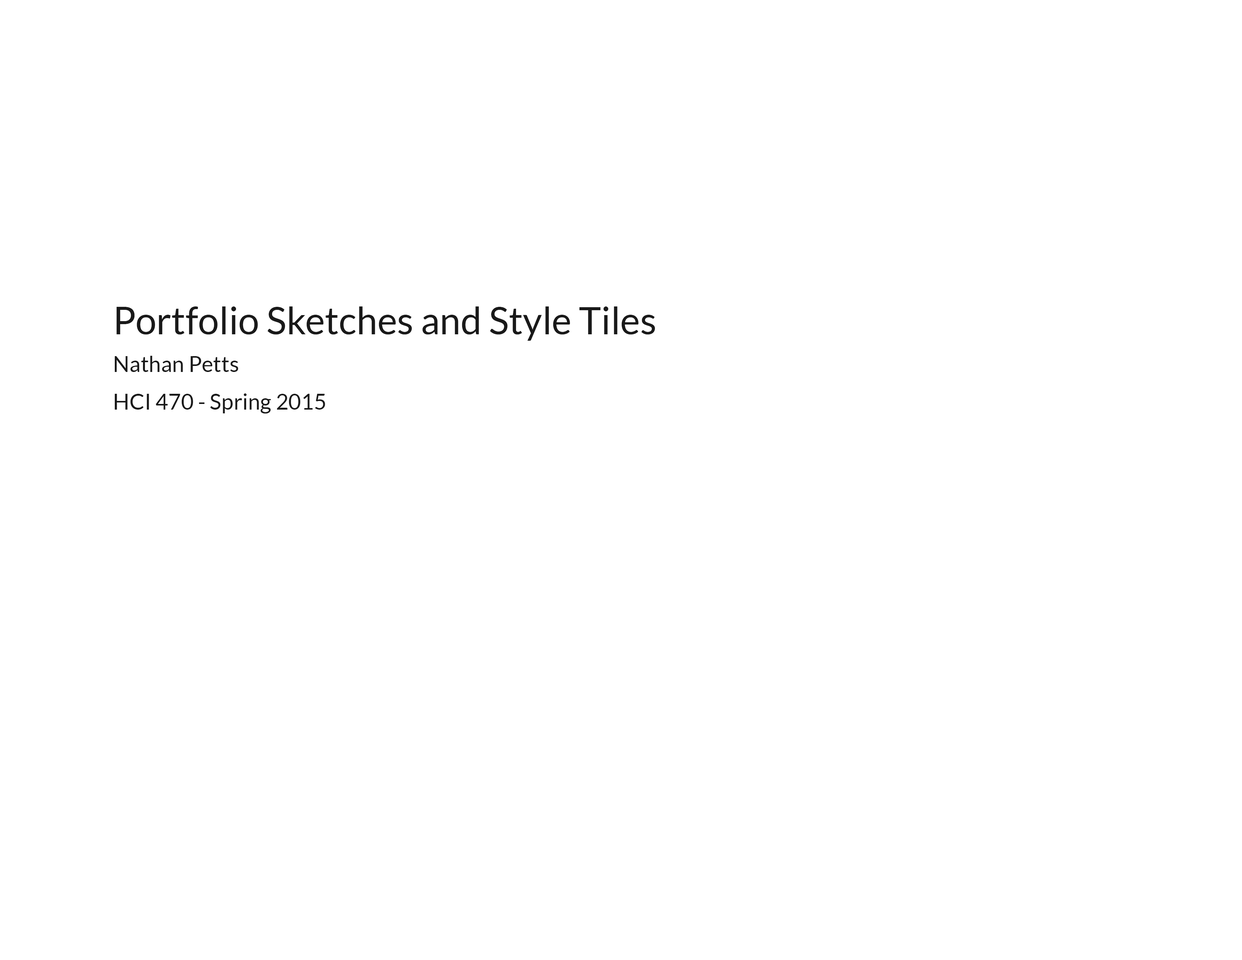
<style>
.page{position:relative;width:1242px;height:960px;background:#ffffff}
.page>*{position:absolute;margin:0}
.t1{font:37.6px/37.6px "Lato-Regular";color:#191919}
.t2{font:22px/37.6px "Lato-Regular";color:#191919}
</style>
<div class="page">
<p class="t1" style="left:115px;top:306px;width:540px;height:108px">Portfolio Sketches and Style Tiles<br><span class="t2">Nathan Petts<br>HCI 470 - Spring 2015</span></p>
</div>
